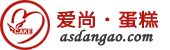
<style>
.page{position:relative;width:170px;height:50px;background:#ffffff}
.page>*{position:absolute;margin:0}
.t1{font:18px "HiraginoSansGB-W3";color:#b31610;font-weight:bold;scale:1.11 1}
.t2{font:16.2px "MonotypeCorsiva";color:#3e3a38;font-weight:bold;scale:1.11 1}
</style>
<div class="page">
<p class="t1" style="left:57px;top:10px;width:101px;height:18px">爱尚·蛋糕</p>
<p class="t2" style="left:60px;top:29px;width:93px;height:17px">asdangao.com</p>
</div>
